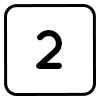
<style>
.page{position:relative;width:100px;height:100px;background:#ffffff}
.page>*{position:absolute;margin:0}
.t1{font:55.7px "QuicksandBold-Regular";color:#000000}
</style>
<div class="page">
<p class="t1" style="left:36px;top:30px;width:26px;height:39px">2</p>
</div>
